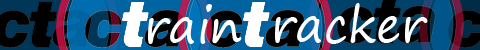
<style>
.page{position:relative;width:480px;height:50px;background:#000000}
.page>*{position:absolute;margin:0}
.t1{font:48px "SegoePrint";color:#ffffff}
</style>
<div class="page">
<p class="t1" style="left:148px;top:4px;width:94px;height:40px">rain</p>
<p class="t1" style="left:275px;top:3px;width:153px;height:41px">racker</p>
</div>
